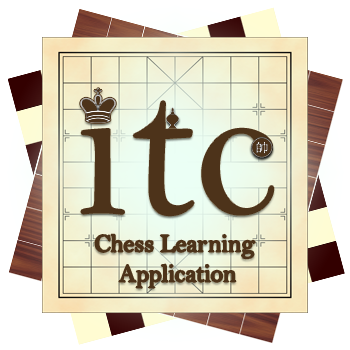
<style>
.page{position:relative;width:350px;height:350px;background:#ffffff}
.page>*{position:absolute;margin:0}
.t1{font:25px "BellMT";color:#4d331a}
</style>
<div class="page">
<p class="t1" style="left:95px;top:234px;width:160px;height:54px;text-align:center">Chess Learning <br>Application</p>
</div>
